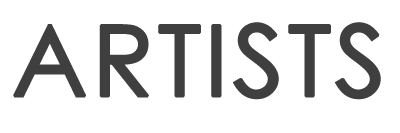
<style>
.page{position:relative;width:400px;height:133px;background:#ffffff}
.page>*{position:absolute;margin:0}
.t1{font:97.9px "CenturyGothic";letter-spacing:0.015em;color:#403f3f;font-weight:bold;scale:1.04 1}
</style>
<div class="page">
<p class="t1" style="left:13px;top:22px;width:368px;height:78px">ARTISTS</p>
</div>
